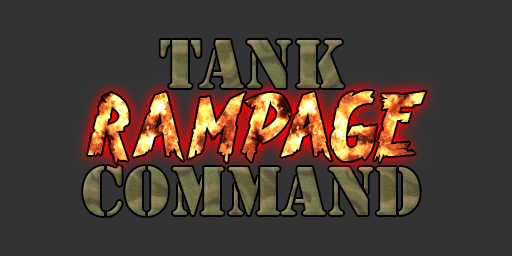
<style>
.page{position:relative;width:512px;height:256px;background:#333333}
.page>*{position:absolute;margin:0}
.t1{font:64px "StencilStd";color:#6f6d46}
.t2{font:96px "Brasblus"}
.t3{font:64px "StencilStd";color:#6e6c46}
</style>
<div class="page">
<p class="t1" style="left:160px;top:40px;width:184px;height:48px">Tank</p>
<p class="t2" style="left:88px;top:91px;width:338px;height:73px">Rampage</p>
<p class="t3" style="left:83px;top:166px;width:337px;height:50px">Command</p>
</div>
